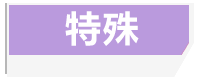
<style>
.page{position:relative;width:205px;height:78px;background:#ba9add}
.page>*{position:absolute;margin:0}
.t1{font:36px "MicrosoftYaHei";letter-spacing:0.05em;color:#ffffff}
</style>
<div class="page">
<p class="t1" style="left:65px;top:11px;width:74px;height:35px">特殊</p>
</div>
